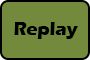
<style>
.page{position:relative;width:90px;height:60px;background:#738a3c}
.page>*{position:absolute;margin:0}
.t1{font:18.5px "ErasITC-Bold";color:#000000}
</style>
<div class="page">
<p class="t1" style="left:14px;top:22px;width:64px;height:17px">Replay</p>
</div>
